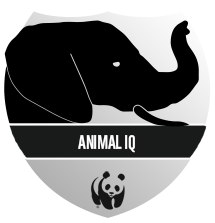
<style>
.page{position:relative;width:215px;height:223px;background:#ffffff}
.page>*{position:absolute;margin:0}
.t1{font:19.4px "WWF";color:#ffffff}
</style>
<div class="page">
<p class="t1" style="left:78px;top:135px;width:57px;height:18px">ANIMAL IQ</p>
</div>
